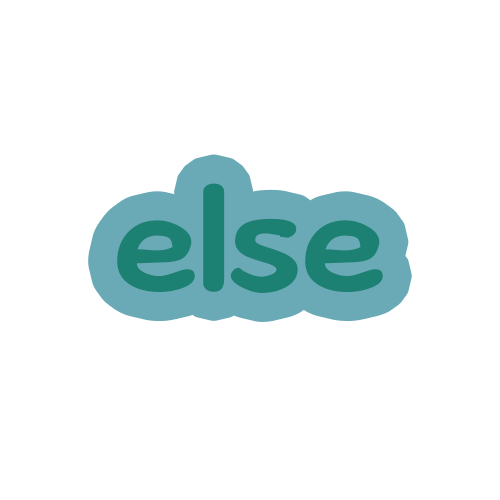
<style>
.page{position:relative;width:500px;height:500px;background:#ffffff}
.page>*{position:absolute;margin:0}
.t1{font:134.5px "Kronika";color:#1c8172;scale:1.05 1}
</style>
<div class="page">
<p class="t1" style="left:117px;top:183px;width:266px;height:110px">else</p>
</div>
